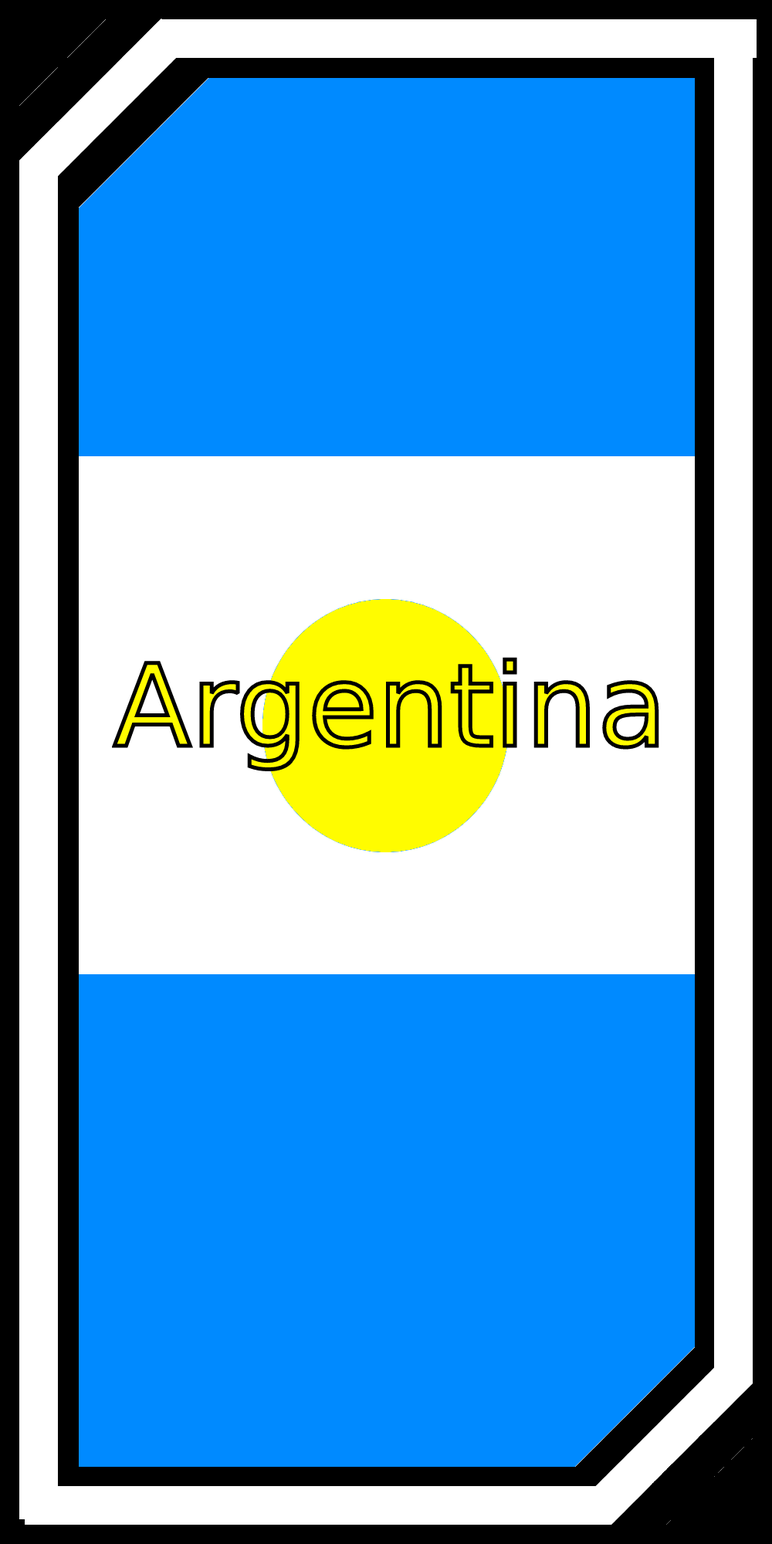
<style>
.page{position:relative;width:772px;height:1544px;background:#008aff}
.page>*{position:absolute;margin:0}
.t1{font:113.5px "DejaVuSans"}
</style>
<div class="page">
<p class="t1" style="left:112px;top:657px;width:547px;height:114px">Argentina</p>
</div>
